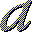
<style>
.page{position:relative;width:32px;height:32px;background:#ffffff}
.page>*{position:absolute;margin:0}
.t1{font:82.4px "Alize-Regular"}
</style>
<div class="page">
<p class="t1" style="left:0px;top:0px;width:31px;height:31px">a</p>
</div>
